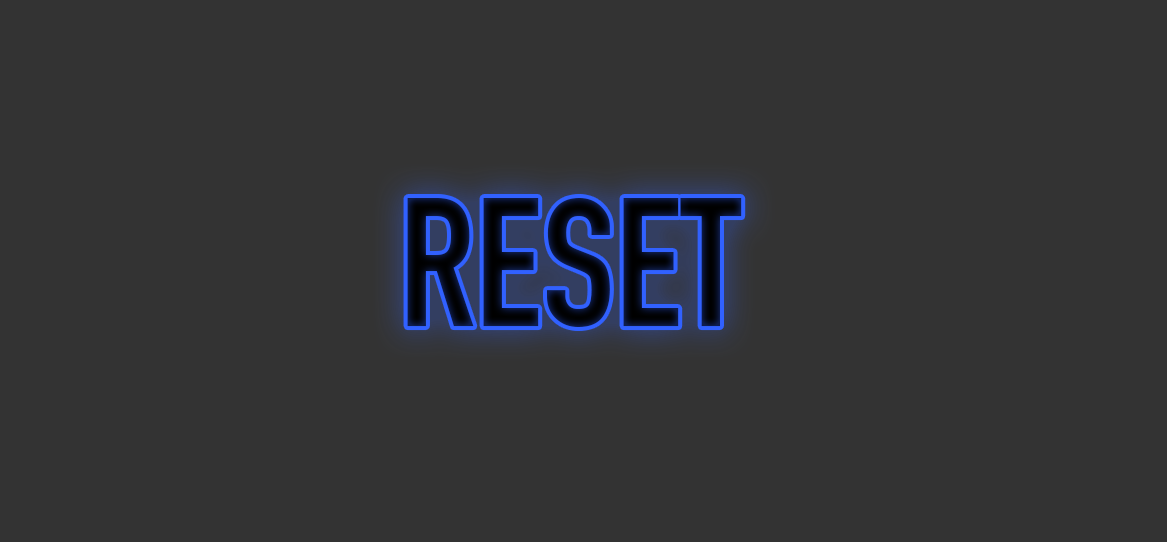
<style>
.page{position:relative;width:1167px;height:542px;background:#333333}
.page>*{position:absolute;margin:0}
.t1{font:179.5px "DINEngschrift";color:#040815}
</style>
<div class="page">
<p class="t1" style="left:407px;top:198px;width:335px;height:129px">RESET</p>
</div>
